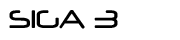
<style>
.page{position:relative;width:180px;height:40px;background:#ffffff}
.page>*{position:absolute;margin:0}
.t1{font:30px "Neuropol";color:#000000}
</style>
<div class="page">
<p class="t1" style="left:9px;top:10px;width:109px;height:19px">SIGA 3</p>
</div>
